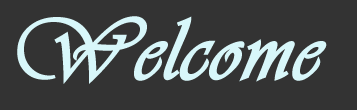
<style>
.page{position:relative;width:357px;height:110px;background:#333333}
.page>*{position:absolute;margin:0}
.t1{font:90px "Vivaldii";color:#daf9fc;font-weight:bold}
</style>
<div class="page">
<p class="t1" style="left:17px;top:16px;width:310px;height:68px">Welcome</p>
</div>
